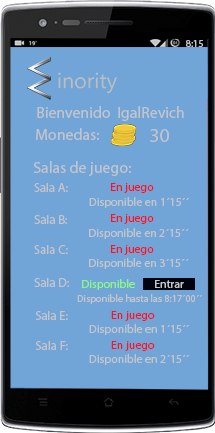
<style>
.page{position:relative;width:215px;height:433px;background:#71a4d7}
.page>*{position:absolute;margin:0}
.t1{font:10px "MyriadPro-Regular";color:#c4c5cb}
.t2{font:15.8px "MyriadPro-Regular";color:#c4c5cb}
.t3{font:20px "MyriadPro-Regular";color:#c4c5cb}
.t4{font:12.6px "MyriadPro-Regular";color:#c4c5cb}
.t5{font:11.8px "MyriadPro-Regular";color:#c4c5cb}
.t6{font:11.8px "MyriadPro-Regular";color:#f61525}
.t7{font:11.8px "MyriadPro-Regular";color:#8ef686}
.t8{font:10.3px "MyriadPro-Regular";color:#c4c5cb}
</style>
<div class="page">
<p class="t1" style="left:186px;top:40px;width:17px;height:7px">8:15</p>
<p class="t2" style="left:37px;top:106px;width:147px;height:15px">Bienvenido  IgalRevich</p>
<p class="t2" style="left:36px;top:128px;width:64px;height:13px">Monedas:</p>
<p class="t3" style="left:150px;top:129px;width:19px;height:13px">30</p>
<p class="t2" style="left:33px;top:161px;width:98px;height:15px">Salas de juego:</p>
<p class="t4" style="left:34px;top:183px;width:34px;height:9px">Sala A:</p>
<p class="t5" style="left:89px;top:183px;width:100px;height:25px;text-align:center"><span class="t6">En juego<br>      </span>Disponible en 1´15´´</p>
<p class="t4" style="left:34px;top:215px;width:33px;height:9px">Sala B:</p>
<p class="t5" style="left:89px;top:214px;width:100px;height:25px;text-align:center"><span class="t6">En juego<br></span>      Disponible en 2´15´´</p>
<p class="t4" style="left:34px;top:245px;width:34px;height:9px">Sala C:</p>
<p class="t5" style="left:89px;top:245px;width:100px;height:24px;text-align:center"><span class="t6">En juego<br></span>      Disponible en 3´15´´</p>
<p class="t4" style="left:34px;top:278px;width:35px;height:9px">Sala D:</p>
<p class="t7" style="left:82px;top:279px;width:53px;height:11px">Disponible</p>
<p class="t5" style="left:155px;top:280px;width:29px;height:8px">Entrar</p>
<p class="t8" style="left:77px;top:294px;width:125px;height:10px">Disponible hasta las 8:17´00´´</p>
<p class="t4" style="left:35px;top:311px;width:33px;height:9px">Sala E:</p>
<p class="t5" style="left:89px;top:311px;width:100px;height:24px;text-align:center"><span class="t6">En juego<br></span>      Disponible en 1´15´´</p>
<p class="t4" style="left:35px;top:341px;width:33px;height:9px">Sala F:</p>
<p class="t5" style="left:89px;top:341px;width:100px;height:24px;text-align:center"><span class="t6">En juego<br></span>      Disponible en 2´15´´</p>
</div>
